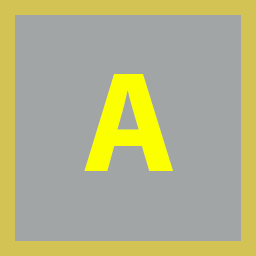
<style>
.page{position:relative;width:256px;height:256px;background:#a2a5a5}
.page>*{position:absolute;margin:0}
.t1{font:144px "MyriadPro-Bold";color:#fcff00}
</style>
<div class="page">
<p class="t1" style="left:84px;top:74px;width:89px;height:97px">A</p>
</div>
